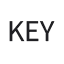
<style>
.page{position:relative;width:64px;height:64px;background:#ffffff}
.page>*{position:absolute;margin:0}
.t1{font:30px "SourceSansRoman-Regular";color:#202024}
</style>
<div class="page">
<p class="t1" style="left:9px;top:21px;width:46px;height:21px">KEY</p>
</div>
